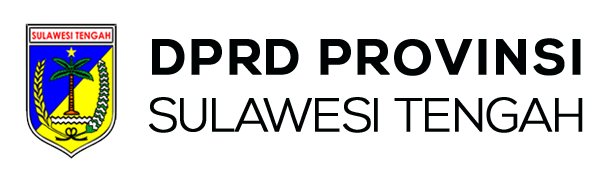
<style>
.page{position:relative;width:600px;height:171px;background:#ffffff}
.page>*{position:absolute;margin:0}
.t1{font:49.3px "NexaBold";letter-spacing:0.06em;color:#000303;font-weight:bold}
.t2{font:46.9px "NexaLight";letter-spacing:-0.03em;color:#000303;font-weight:bold}
</style>
<div class="page">
<p class="t1" style="left:152px;top:38px;width:429px;height:38px">DPRD PROVINSI</p>
<p class="t2" style="left:149px;top:97px;width:434px;height:36px">SULAWESI TENGAH</p>
</div>
